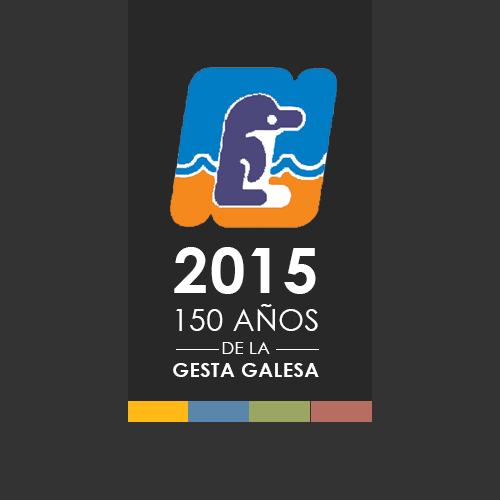
<style>
.page{position:relative;width:500px;height:500px;background:#333333}
.page>*{position:absolute;margin:0}
.t1{font:20px/22.7px "CenturyGothic-Bold";letter-spacing:0.02em;color:#ffffff}
.t2{font:63px/38px "CenturyGothic-Bold";letter-spacing:0.02em;color:#ffffff}
.t3{font:30px/38px "CenturyGothic";letter-spacing:0.02em;color:#ffffff}
.t4{font:17px/22.7px "CenturyGothic";letter-spacing:0.02em;color:#ffffff}
</style>
<div class="page">
<p class="t1" style="left:173px;top:247px;width:146px;height:130px;text-align:center"><span class="t2">2015<br></span><span class="t3">150 AÑOS<br></span><span class="t4">DE LA<br></span>GESTA GALESA</p>
</div>
